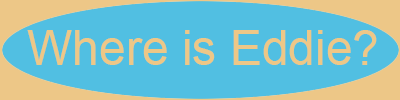
<style>
.page{position:relative;width:400px;height:100px;background:#51bfe2}
.page>*{position:absolute;margin:0}
.t1{font:48px "ArialMT";color:#edc787}
</style>
<div class="page">
<p class="t1" style="left:27px;top:30px;width:350px;height:35px">Where is Eddie?</p>
</div>
